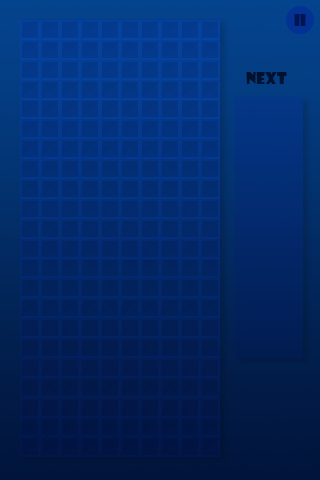
<style>
.page{position:relative;width:320px;height:480px}
.page>*{position:absolute;margin:0}
.t1{font:12px "ShowcardGothic-Reg";color:#01144f}
.t2{font:12px "ShowcardGothic-Reg";color:#01122f}
</style>
<div class="page">
<p class="t1" style="left:294px;top:14px;width:12px;height:12px">II</p>
<p class="t2" style="left:246px;top:72px;width:41px;height:12px">NEXT</p>
</div>
